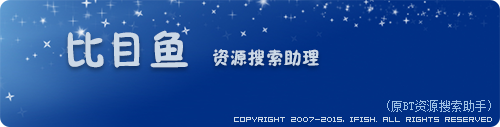
<style>
.page{position:relative;width:500px;height:127px;background:#012f85}
.page>*{position:absolute;margin:0}
.t1{font:18px "FZSEJW--GB1-0";color:#cbd8e6}
.t2{font:42px "FZSEJW--GB1-0";color:#cbd8e6}
.t3{font:12px "NSimSun";color:#9ec1e5}
.t4{font:6px "04b08";color:#cbd8e6}
</style>
<div class="page">
<p class="t1" style="left:67px;top:30px;width:252px;height:38px"><span class="t2">比目鱼  </span>资源搜索助理</p>
<p class="t3" style="left:387px;top:100px;width:104px;height:12px">(原BT资源搜索助手)</p>
<p class="t4" style="left:234px;top:117px;width:258px;height:5px">COPYRIGHT 2007-2015, iFish. ALL RIGHTS RESERVED</p>
</div>
